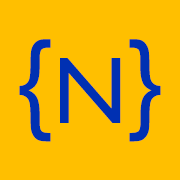
<style>
.page{position:relative;width:180px;height:180px;background:#ffbf00}
.page>*{position:absolute;margin:0}
.t1{font:108.6px "GillSans";color:#0030b2}
.t2{font:95.3px "GillSans";color:#0030b2}
</style>
<div class="page">
<p class="t1" style="left:19px;top:39px;width:142px;height:103px">{<span class="t2">N</span>}</p>
</div>
